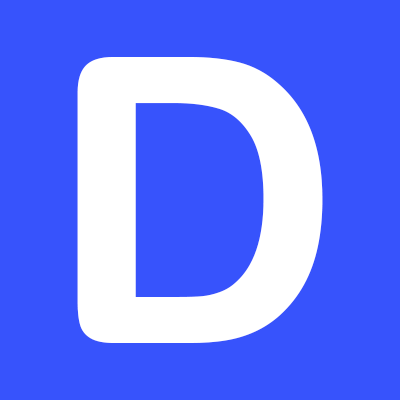
<style>
.page{position:relative;width:400px;height:400px;background:#3753fc}
.page>*{position:absolute;margin:0}
.t1{font:400px "ArialRoundedMTBold";color:#ffffff}
</style>
<div class="page">
<p class="t1" style="left:77px;top:57px;width:246px;height:286px">D</p>
</div>
